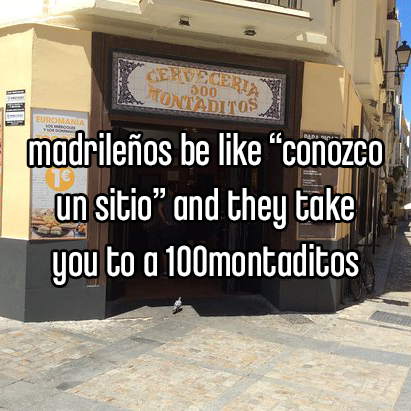
<style>
.page{position:relative;width:411px;height:411px}
.page>*{position:absolute;margin:0}
.t1{font:46.1px "ChaletComprime-CologneEighty";color:#ffffff}
</style>
<div class="page">
<p class="t1" style="left:29px;top:132px;width:353px;height:153px;text-align:center">madrileños be like “conozco<br>un sitio” and they take<br>you to a 100montaditos</p>
</div>
